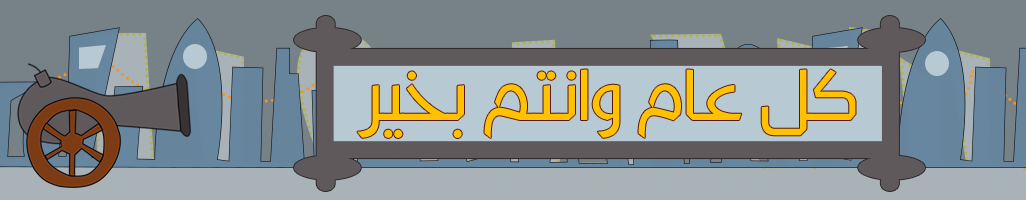
<style>
.page{position:relative;width:1026px;height:200px;background:#768288}
.page>*{position:absolute;margin:0}
.t1{font:69.7px "KufyanArabic-Medium";color:#ffc100}
</style>
<div class="page">
<p class="t1" style="left:357px;top:69px;width:499px;height:69px">كل عام وانتم بخير</p>
</div>
